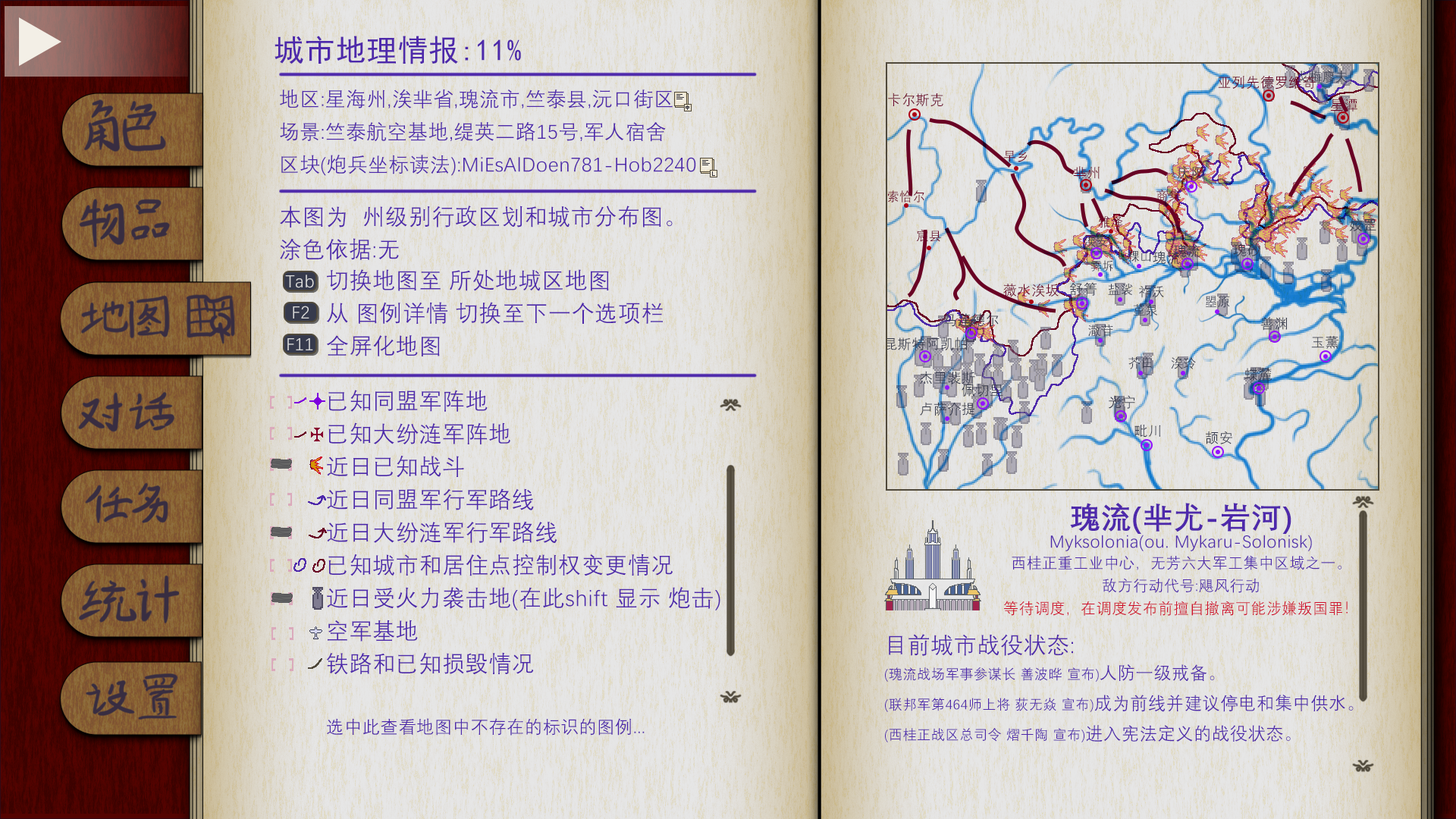
<style>
.page{position:relative;width:1456px;height:819px}
.page>*{position:absolute;margin:0}
.t1{font:30.3px "SimHei";letter-spacing:0.02em;color:#4e29ab}
.t2{font:13.9px "DengXian";letter-spacing:0.02em;color:#690124}
.t3{font:12.6px "DengXian";letter-spacing:0.02em;color:#363a4c}
.t4{font:20.2px/32.9px "DengXian";letter-spacing:0.02em;color:#4e29ab}
.t5{font:12.6px "DengXian";letter-spacing:0.02em;color:#690124}
.t6{font:13.9px "DengXian";letter-spacing:0.02em;color:#363a4c}
.t7{font:22.7px/32.9px "DengXian";letter-spacing:0.02em;color:#4e29ab}
.t8{font:11.4px "DengXian";letter-spacing:0.02em;color:#363a4c}
.t9{font:17.7px "DengXian";letter-spacing:0.02em;color:#d9d9d9}
.t10{font:17.7px/32.9px "DengXian";letter-spacing:0.02em;color:#4e29ab}
.t11{font:15.2px/22.7px "DengXian";letter-spacing:0.02em;color:#4e29ab}
.t12{font:30.3px/30.3px "DengXian-Bold";letter-spacing:0.02em;color:#4e29ab}
.t13{font:17.7px/22.7px "DengXian";letter-spacing:0.02em;color:#4e29ab}
.t14{font:15.2px/22.7px "DengXian";letter-spacing:0.02em;color:#cf112c}
.t15{font:13.9px/30.3px "DengXian";letter-spacing:0.02em;color:#4e29ab}
.t16{font:22.7px/30.3px "DengXian";letter-spacing:0.02em;color:#4e29ab}
.t17{font:17.7px/30.3px "DengXian";letter-spacing:0.02em;color:#4e29ab}
</style>
<div class="page">
<p class="t1" style="left:275px;top:36px;width:246px;height:28px">城市地理情报:11%</p>
<p class="t2" style="left:1218px;top:76px;width:98px;height:13px">亚列先德罗维奇</p>
<p class="t3" style="left:1297px;top:70px;width:51px;height:13px">戈梅廖夫</p>
<p class="t4" style="left:280px;top:89px;width:416px;height:87px">地区:星海州,涘芈省,瑰流市,竺泰县,沅口街区<br>场景:竺泰航空基地,缇英二路15号,军人宿舍<br>区块(炮兵坐标读法):MiEsAlDoen781-Hob2240</p>
<p class="t2" style="left:888px;top:93px;width:55px;height:14px">卡尔斯克</p>
<p class="t2" style="left:1330px;top:99px;width:27px;height:12px">星潭</p>
<p class="t5" style="left:1003px;top:150px;width:25px;height:12px">早乡</p>
<p class="t2" style="left:1073px;top:166px;width:27px;height:13px">芈州</p>
<p class="t6" style="left:1177px;top:166px;width:26px;height:13px">庆阳</p>
<p class="t5" style="left:888px;top:190px;width:36px;height:12px">索恰尔</p>
<p class="t5" style="left:1156px;top:189px;width:25px;height:13px">商集</p>
<p class="t7" style="left:280px;top:206px;width:393px;height:54px">本图为  州级别行政区划和城市分布图。<br>涂色依据:无</p>
<p class="t5" style="left:1098px;top:216px;width:25px;height:12px">雅泽</p>
<p class="t6" style="left:1349px;top:218px;width:27px;height:13px">姣罡</p>
<p class="t5" style="left:916px;top:229px;width:25px;height:13px">宸县</p>
<p class="t3" style="left:1084px;top:234px;width:25px;height:13px">涘安</p>
<p class="t6" style="left:1173px;top:244px;width:27px;height:13px">瑰流</p>
<p class="t6" style="left:1233px;top:243px;width:27px;height:13px">瑰砂</p>
<p class="t3" style="left:1127px;top:250px;width:24px;height:12px">稞山</p>
<p class="t6" style="left:1153px;top:251px;width:27px;height:13px">瑰流</p>
<p class="t7" style="left:327px;top:269px;width:336px;height:87px">切换地图至 所处地城区地图<br>从 图例详情 切换至下一个选项栏<br>全屏化地图</p>
<p class="t8" style="left:1090px;top:260px;width:23px;height:11px">霁坼</p>
<p class="t9" style="left:285px;top:275px;width:29px;height:13px">Tab</p>
<p class="t2" style="left:1003px;top:284px;width:56px;height:13px">薇水涘坂</p>
<p class="t6" style="left:1069px;top:282px;width:28px;height:14px">舒箐</p>
<p class="t3" style="left:1108px;top:284px;width:25px;height:11px">盐裟</p>
<p class="t3" style="left:1139px;top:286px;width:25px;height:12px">祚沃</p>
<p class="t9" style="left:293px;top:306px;width:16px;height:12px">F2</p>
<p class="t3" style="left:1133px;top:303px;width:25px;height:13px">堇泉</p>
<p class="t3" style="left:1206px;top:296px;width:24px;height:12px">曌原</p>
<p class="t6" style="left:944px;top:313px;width:55px;height:14px">马莲德尔</p>
<p class="t6" style="left:1260px;top:317px;width:28px;height:14px">善渊</p>
<p class="t3" style="left:1088px;top:325px;width:25px;height:12px">潵苷</p>
<p class="t9" style="left:287px;top:338px;width:26px;height:12px">F11</p>
<p class="t6" style="left:886px;top:337px;width:81px;height:13px">昆斯特阿凯帕</p>
<p class="t6" style="left:1311px;top:336px;width:27px;height:13px">玉薰</p>
<p class="t3" style="left:1128px;top:356px;width:24px;height:13px">芥田</p>
<p class="t3" style="left:1171px;top:356px;width:25px;height:13px">涘玲</p>
<p class="t6" style="left:920px;top:371px;width:55px;height:13px">杰里裴斯</p>
<p class="t6" style="left:1244px;top:367px;width:28px;height:14px">蝶麓</p>
<p class="t7" style="left:326px;top:390px;width:394px;height:346px">已知同盟军阵地<br>已知大纷涟军阵地<br>近日已知战斗<br>近日同盟军行军路线<br>近日大纷涟军行军路线<br>已知城市和居住点控制权变更情况<br>近日受火力袭击地(在此shift 显示 炮击)<br>空军基地<br>铁路和已知损毁情况<br><br><span class="t10">选中此查看地图中不存在的标识的图例...</span></p>
<p class="t6" style="left:962px;top:384px;width:41px;height:13px">佩切里</p>
<p class="t6" style="left:920px;top:402px;width:55px;height:14px">卢萨介提</p>
<p class="t6" style="left:1109px;top:395px;width:26px;height:14px">光宁</p>
<p class="t6" style="left:1134px;top:425px;width:27px;height:12px">毗川</p>
<p class="t6" style="left:1206px;top:431px;width:26px;height:13px">颉安</p>
<p class="t11" style="left:1004px;top:503px;width:344px;height:113px;text-align:center"><span class="t12">瑰流(芈尤-岩河)<br></span><span class="t13">Myksolonia(ou. Mykaru-Solonisk)<br></span>西桂正重工业中心，无芳六大军工集中区域之一。<br>敌方行动代号:飓风行动<br><span class="t14">等待调度，在调度发布前擅自撤离可能涉嫌叛国罪！</span></p>
<p class="t15" style="left:885px;top:634px;width:469px;height:108px"><span class="t16">目前城市战役状态:<br></span>(瑰流战场军事参谋长 善波晔 宣布)<span class="t17">人防一级戒备。<br></span>(联邦军第464师上将 荻无焱 宣布)<span class="t17">成为前线并建议停电和集中供水。<br></span>(西桂正战区总司令 熠千陶 宣布)<span class="t17">进入宪法定义的战役状态。</span></p>
</div>
